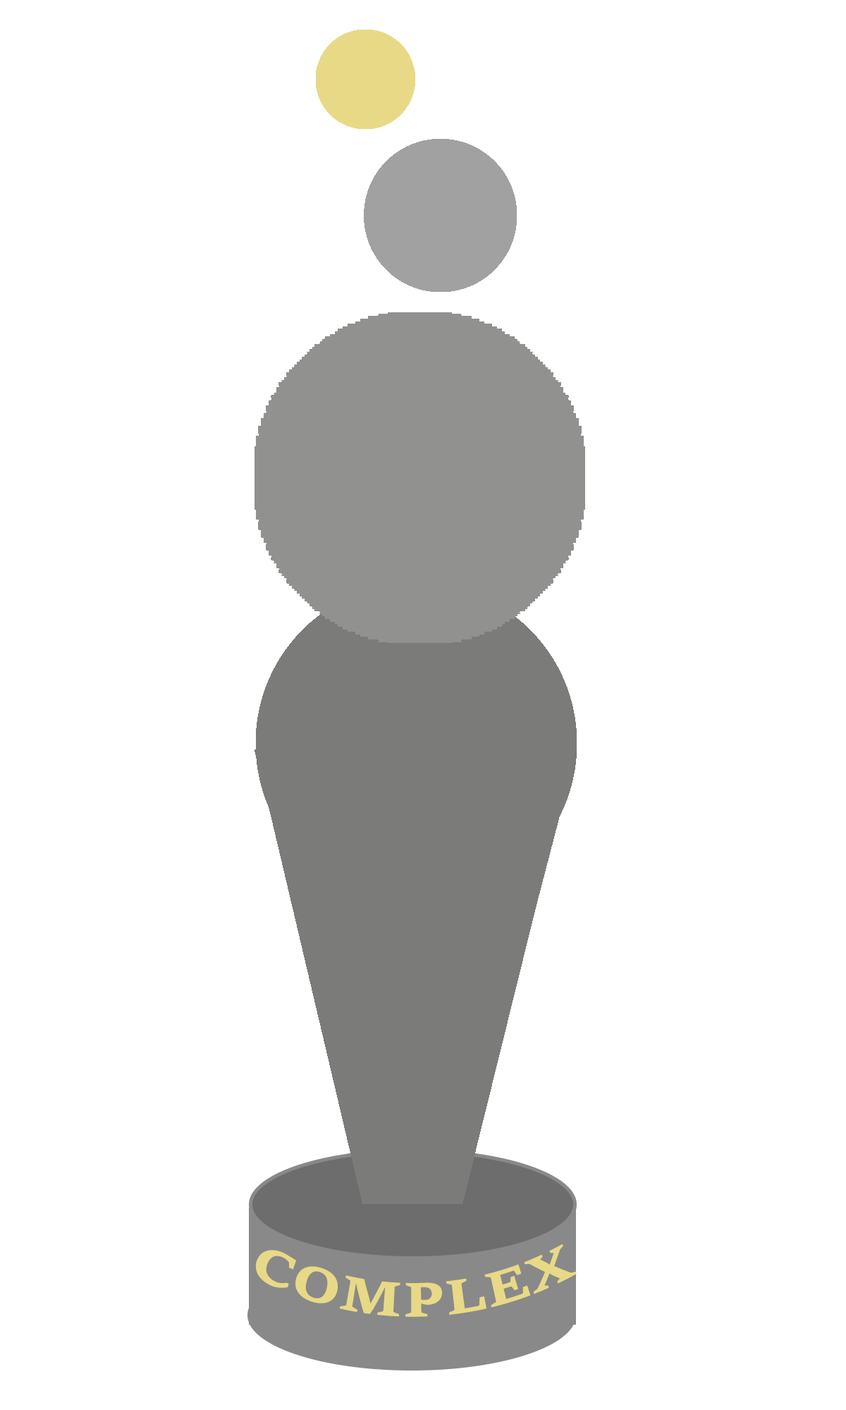
<style>
.page{position:relative;width:846px;height:1410px;background:#ffffff}
.page>*{position:absolute;margin:0}
.t1{font:52.9px "SitkaSmall-Bold";color:#e8d987}
</style>
<div class="page">
<p class="t1" style="left:255px;top:1243px;width:322px;height:74px">COMPLEX</p>
</div>
